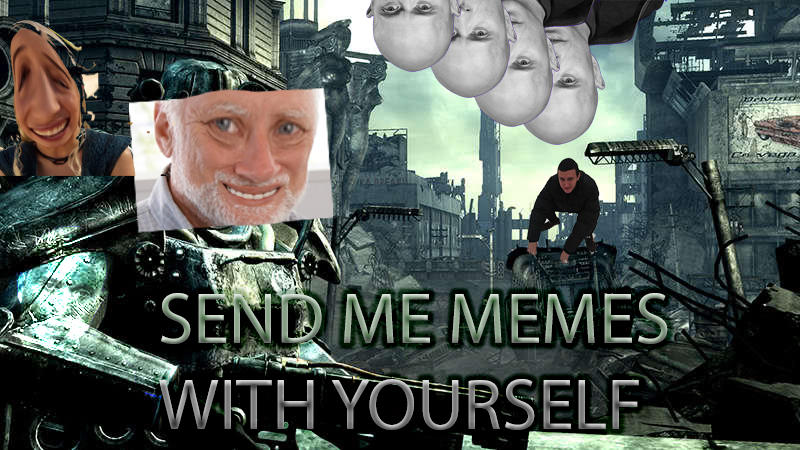
<style>
.page{position:relative;width:800px;height:450px}
.page>*{position:absolute;margin:0}
.t1{font:72px "MyriadPro-Regular"}
</style>
<div class="page">
<p class="t1" style="left:159px;top:293px;width:509px;height:137px">SEND ME MEMES<br>WITH YOURSELF</p>
</div>
